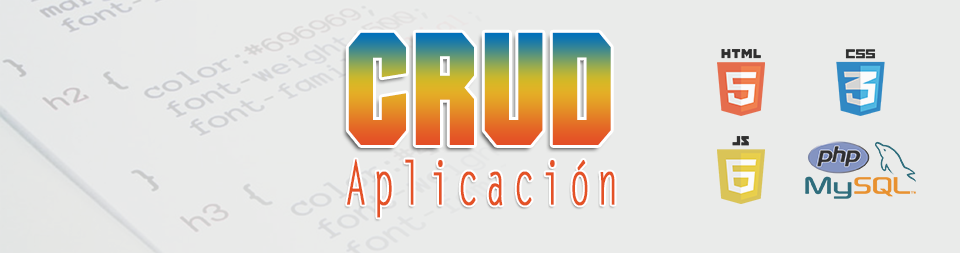
<style>
.page{position:relative;width:960px;height:253px;background:#eaebea}
.page>*{position:absolute;margin:0}
.t1{font:156px "Autumn";letter-spacing:0.02em;scale:0.83 1}
.t2{font:60px "LetterGothicStd";letter-spacing:0.18em;color:#e45226;font-weight:bold;scale:0.58 1}
</style>
<div class="page">
<p class="t1" style="left:348px;top:32px;width:263px;height:113px">CRUD</p>
<p class="t2" style="left:347px;top:159px;width:268px;height:59px">Aplicación</p>
</div>
